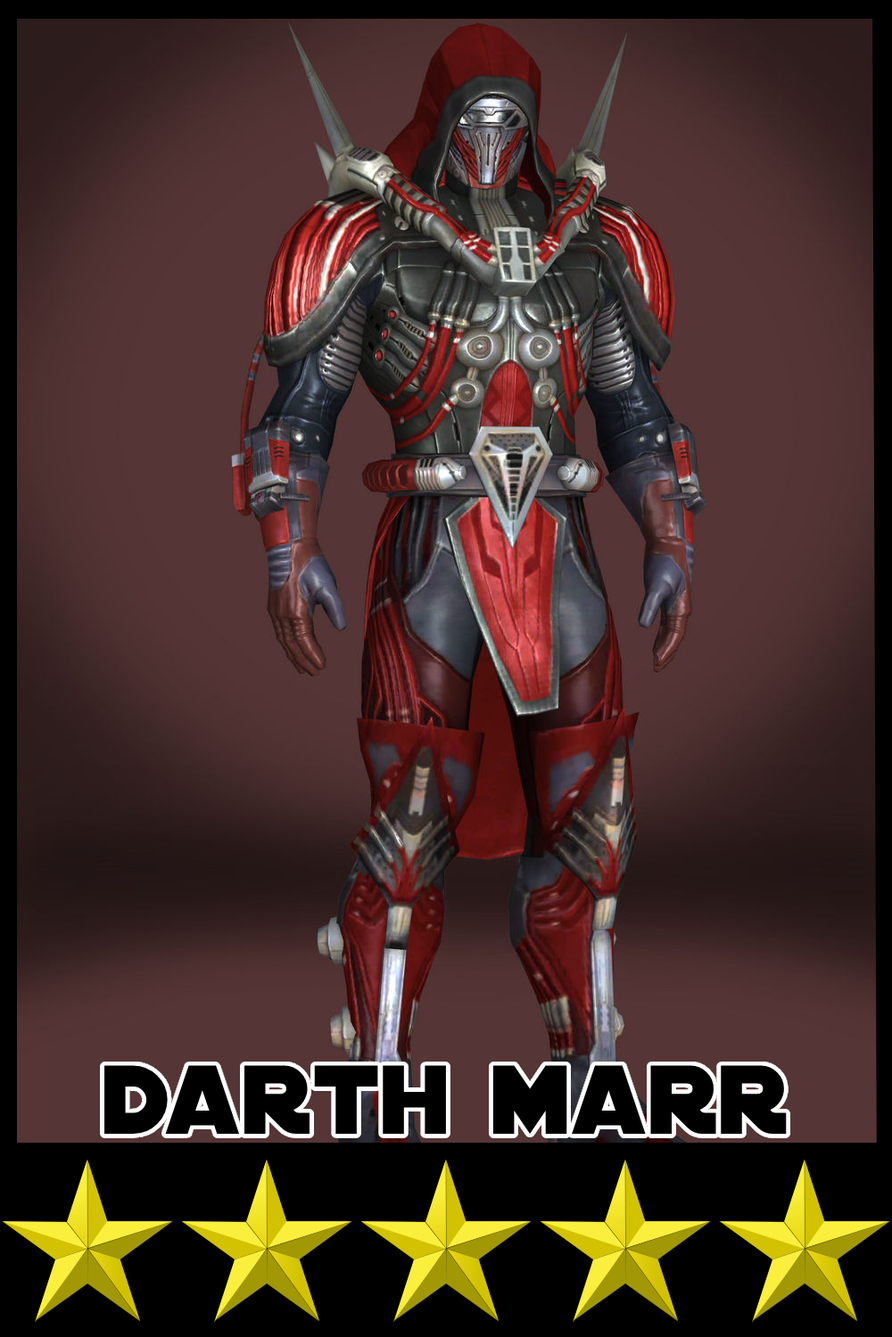
<style>
.page{position:relative;width:892px;height:1337px}
.page>*{position:absolute;margin:0}
.t1{font:104.9px "DistantGalaxy";color:#000000}
</style>
<div class="page">
<p class="t1" style="left:104px;top:1065px;width:682px;height:69px">darth marr</p>
</div>
